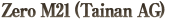
<style>
.page{position:relative;width:175px;height:19px;background:#ffffff}
.page>*{position:absolute;margin:0}
.t1{font:18px "RyuminPro-ExBold";letter-spacing:-0.06em;color:#4a3f32;font-weight:bold;scale:0.9 1}
</style>
<div class="page">
<p class="t1" style="left:1px;top:1px;width:164px;height:18px">Zero M21 (Tainan AG)</p>
</div>
